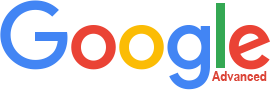
<style>
.page{position:relative;width:272px;height:92px;background:#ffffff}
.page>*{position:absolute;margin:0}
.t1{font:14px "ArialNarrow-Bold";color:#db4437}
</style>
<div class="page">
<p class="t1" style="left:212px;top:71px;width:55px;height:10px">Advanced</p>
</div>
